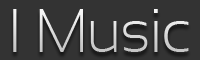
<style>
.page{position:relative;width:200px;height:60px;background:#333333}
.page>*{position:absolute;margin:0}
.t1{font:61.1px "SansationLight";letter-spacing:-0.025em;color:#d7d7d7}
</style>
<div class="page">
<p class="t1" style="left:13px;top:9px;width:176px;height:43px">I Music</p>
</div>
